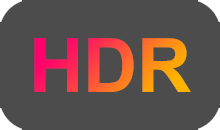
<style>
.page{position:relative;width:220px;height:130px;background:#4c4c4c}
.page>*{position:absolute;margin:0}
.t1{font:75px "Arial-BoldMT"}
</style>
<div class="page">
<p class="t1" style="left:34px;top:38px;width:157px;height:54px">HDR</p>
</div>
